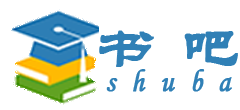
<style>
.page{position:relative;width:240px;height:110px;background:#ffffff}
.page>*{position:absolute;margin:0}
.t1{font:54.8px "STLiti";letter-spacing:0.39em;color:#3080b6;font-weight:bold;scale:1.09 1}
.t2{font:32.2px "STLiti";letter-spacing:0.53em;color:#3080b6;font-weight:bold;scale:0.9 1}
</style>
<div class="page">
<p class="t1" style="left:99px;top:30px;width:139px;height:37px">书吧</p>
<p class="t2" style="left:106px;top:69px;width:126px;height:23px">shuba</p>
</div>
